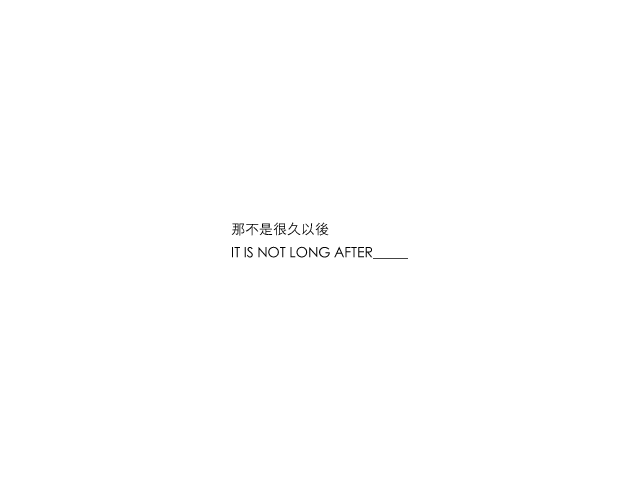
<style>
.page{position:relative;width:640px;height:480px;background:#ffffff}
.page>*{position:absolute;margin:0}
.t1{font:14px/24px "STHeitiTC-Light";color:#000000}
</style>
<div class="page">
<p class="t1" style="left:231px;top:222px;width:177px;height:37px">那不是很久以後<br>IT IS NOT LONG AFTER_____</p>
</div>
